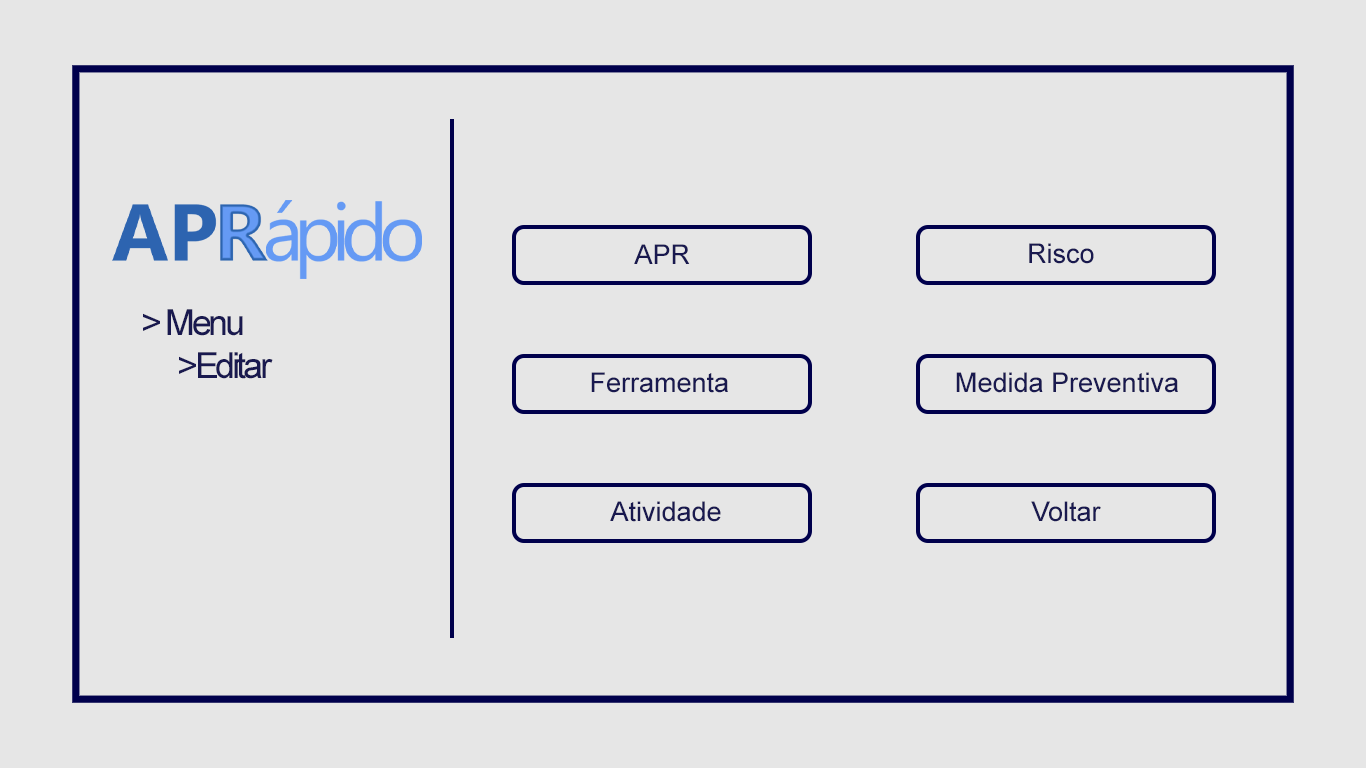
<style>
.page{position:relative;width:1366px;height:768px;background:#e6e6e6}
.page>*{position:absolute;margin:0}
.t1{font:27px "ArialMT";color:#19194f}
.t2{font:36px "ArialMT";letter-spacing:-0.095em;color:#19194f}
</style>
<div class="page">
<p class="t1" style="left:634px;top:244px;width:56px;height:20px">APR</p>
<p class="t1" style="left:1029px;top:243px;width:65px;height:21px">Risco</p>
<p class="t2" style="left:143px;top:309px;width:130px;height:70px">&gt; Menu<br> &gt;Editar</p>
<p class="t1" style="left:591px;top:372px;width:137px;height:21px">Ferramenta</p>
<p class="t1" style="left:956px;top:372px;width:222px;height:21px">Medida Preventiva</p>
<p class="t1" style="left:610px;top:501px;width:111px;height:21px">Atividade</p>
<p class="t1" style="left:1031px;top:501px;width:70px;height:21px">Voltar</p>
</div>
